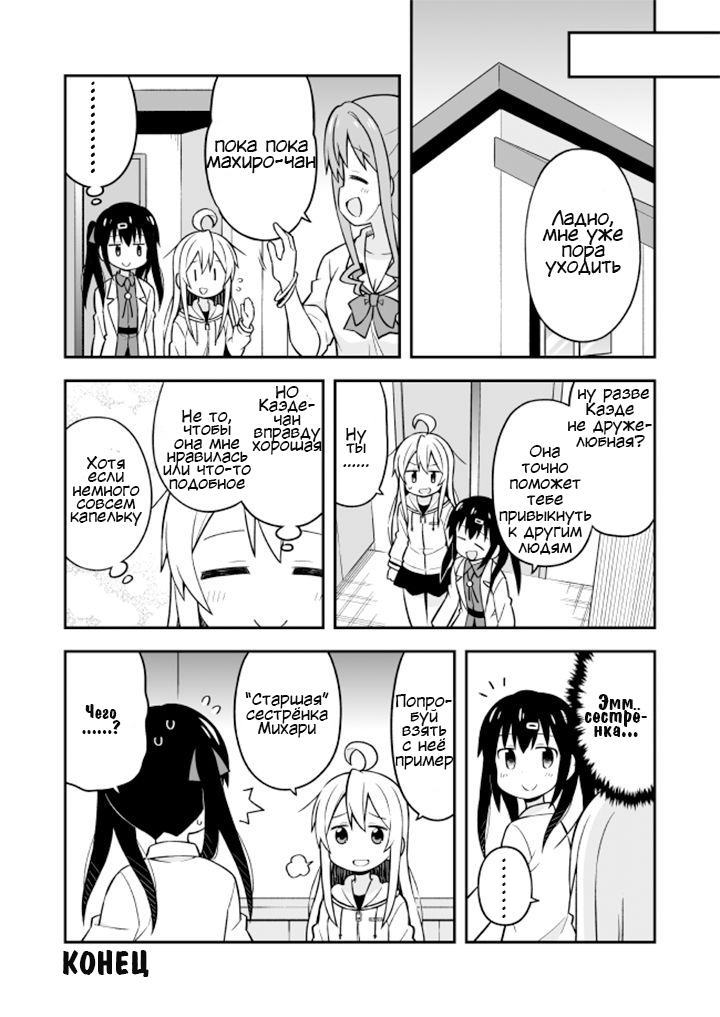
<style>
.page{position:relative;width:720px;height:1017px;background:#ffffff}
.page>*{position:absolute;margin:0}
.t1{font:24px/8px "KuraiVoice2";color:#0b0b0b}
.t2{font:18.7px/8px "KuraiVoice2";color:#0b0b0b}
.t3{font:18.7px/16px "KuraiVoice2";color:#0b0b0b}
.t4{font:16px/13.3px "KuraiVoice2";color:#0b0b0b}
.t5{font:16px/16px "KuraiVoice2";color:#0b0b0b}
.t6{font:16px/14.7px "KuraiVoice2";color:#0b0b0b}
.t7{font:21.3px/13.3px "ADomInoBold";color:#0b0b0b}
.t8{font:18.7px/14.7px "ADomInoBold";color:#0b0b0b}
.t9{font:32px "ADomInoBold";color:#0b0b0b}
</style>
<div class="page">
<p class="t1" style="left:90px;top:81px;width:5px;height:92px;text-align:center"><span class="t2">.<br></span>.<br>.<br>.<br>.<br>.<br>.<br>.<br>.<br>.<br>.<br>.</p>
<p class="t3" style="left:206px;top:140px;width:110px;height:34px;text-align:center">пока пока<br>махиро-чан</p>
<p class="t3" style="left:542px;top:210px;width:81px;height:67px;text-align:center">Ладно,<br>мне уже<br>пора<br>уходить</p>
<p class="t4" style="left:252px;top:385px;width:70px;height:70px;text-align:center">НО<br>Каэде-<br>чан<br>вправду<br>хорошая</p>
<p class="t5" style="left:567px;top:389px;width:85px;height:59px;text-align:center">ну разве<br>Каэде<br>не друже-<br>любная?</p>
<p class="t4" style="left:163px;top:409px;width:88px;height:82px;text-align:center">Не то,<br>чтобы<br>она мне<br>нравилась<br>или что-то<br>подобное</p>
<p class="t4" style="left:343px;top:427px;width:26px;height:40px;text-align:center">Ну<br>ты<br>......</p>
<p class="t5" style="left:499px;top:445px;width:93px;height:110px;text-align:center">Она<br>точно<br>поможет<br>тебе<br>привыкнуть<br>к другим<br>людям</p>
<p class="t4" style="left:70px;top:456px;width:72px;height:70px;text-align:center">Хотя<br>если<br>немного<br>совсем<br>капельку</p>
<p class="t6" style="left:245px;top:692px;width:84px;height:46px;text-align:center">“Старшая”<br>сестрёнка<br>Михари</p>
<p class="t6" style="left:395px;top:694px;width:59px;height:76px;text-align:center">Попро-<br>буй<br>взять<br>с неё<br>пример</p>
<p class="t7" style="left:584px;top:694px;width:63px;height:43px;text-align:center">Эмм<br>сестрё-<br>нка...</p>
<p class="t8" style="left:82px;top:704px;width:39px;height:30px;text-align:center">Чего<br>......?</p>
<p class="t2" style="left:502px;top:858px;width:4px;height:60px;text-align:center">.<br>.<br>.<br>.<br>.<br>.<br>.<br>.</p>
<p class="t9" style="left:63px;top:950px;width:86px;height:27px">КОНЕЦ</p>
</div>
